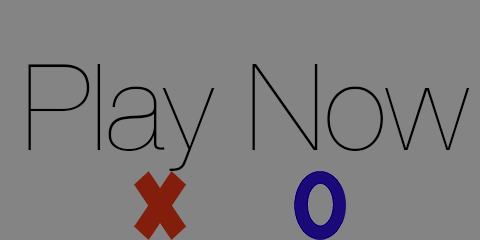
<style>
.page{position:relative;width:480px;height:240px;background:#848484}
.page>*{position:absolute;margin:0}
.t1{font:120px "HelveticaNeue-UltraLight";color:#000000}
</style>
<div class="page">
<p class="t1" style="left:28px;top:64px;width:442px;height:107px">Play Now</p>
</div>
